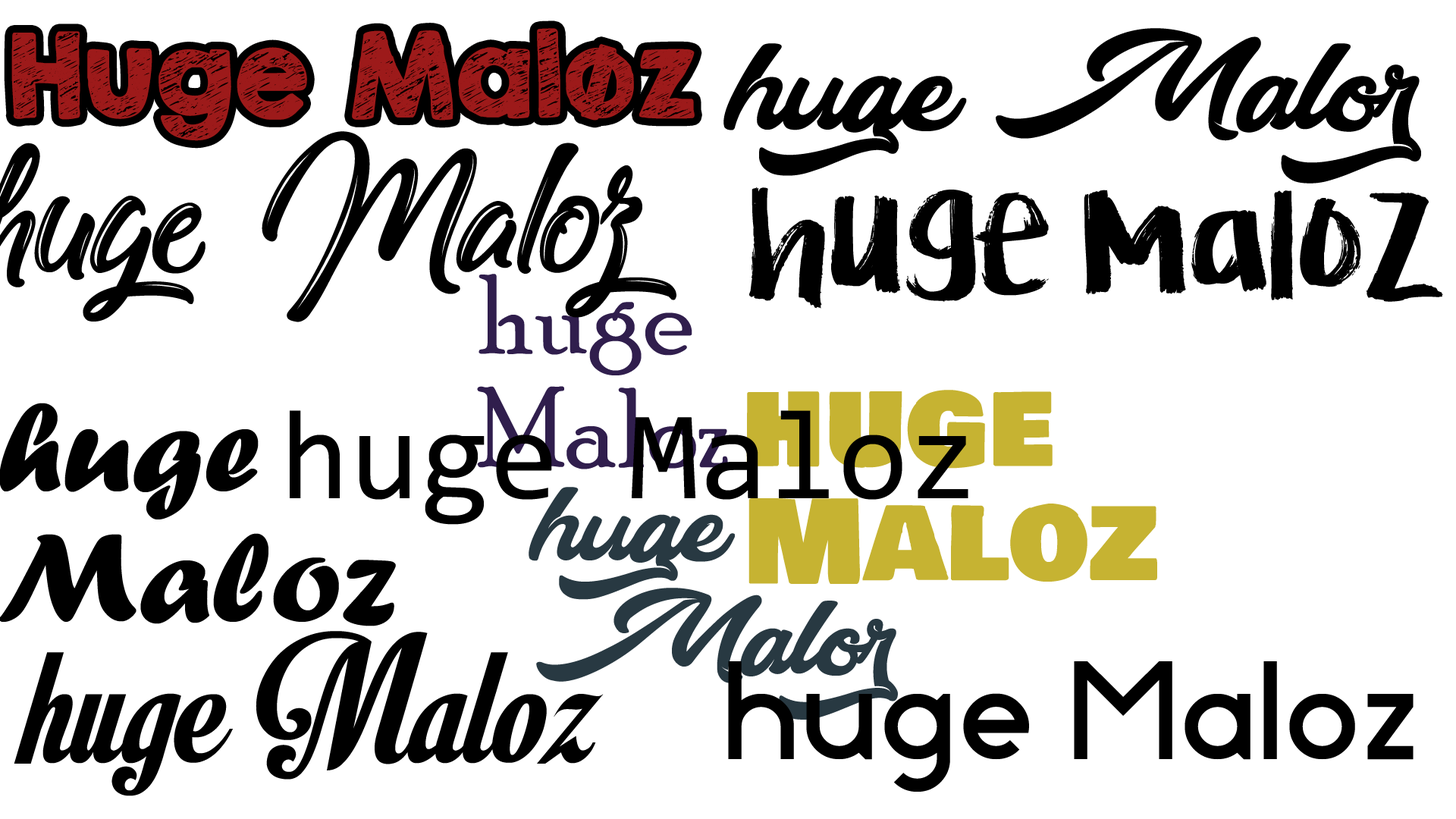
<style>
.page{position:relative;width:1456px;height:819px;background:#ffffff}
.page>*{position:absolute;margin:0}
.t1{font:116.4px "KGBrokenVesselsSketch";color:#9d1a1a}
.t2{font:93.1px "KGBrokenVesselsSketch";color:#9d1a1a}
.t3{font:133.8px "Walking-in-the-Street";color:#000000}
.t4{font:119.9px "KGLifeisMessy";color:#000000}
.t5{font:113.7px/113.7px "PoorRichard-Regular";color:#301e4d}
.t6{font:113.7px/113.7px "BowlbyOneSC-Regular";color:#c6b332}
.t7{font:130.8px/130.8px "ForteMT";color:#000000}
.t8{font:126.9px "Consolas";color:#000000}
.t9{font:113.7px/113.7px "Walking-in-the-Street";color:#283942}
.t10{font:182.2px "MotionPicturePersonalUse";color:#000000}
.t11{font:130.5px "Stark";color:#000000}
</style>
<div class="page">
<p class="t1" style="left:11px;top:28px;width:684px;height:113px">Huge Mal<span class="t2">Ø</span>z</p>
<p class="t3" style="left:723px;top:28px;width:698px;height:156px">huge Maloz</p>
<p class="t4" style="left:749px;top:187px;width:694px;height:122px">huge Maloz</p>
<p class="t5" style="left:477px;top:274px;width:251px;height:195px">huge<br>Maloz</p>
<p class="t6" style="left:746px;top:390px;width:411px;height:194px">huge<br>Maloz</p>
<p class="t7" style="left:0px;top:403px;width:396px;height:223px">huge<br>Maloz</p>
<p class="t8" style="left:290px;top:410px;width:678px;height:115px">huge Maloz</p>
<p class="t9" style="left:529px;top:487px;width:369px;height:233px">huge<br>Maloz</p>
<p class="t10" style="left:14px;top:631px;width:590px;height:165px">huge Maloz</p>
<p class="t11" style="left:728px;top:661px;width:686px;height:131px">huge Maloz</p>
</div>
